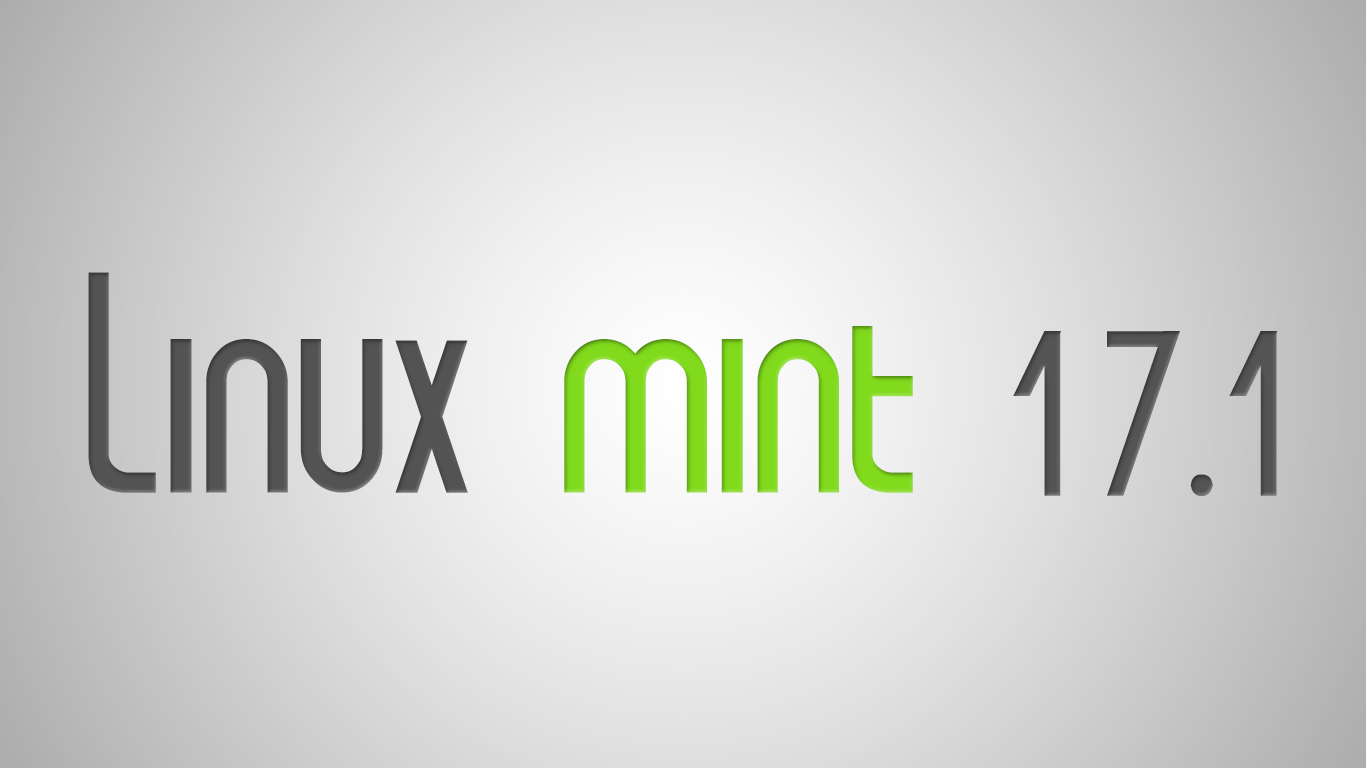
<style>
.page{position:relative;width:1366px;height:768px}
.page>*{position:absolute;margin:0}
.t1{font:333.3px "formintElegance";color:#535353}
.t2{font:333.3px "formintElegance";color:#81db1c}
.t3{font:250px "formintElegance";color:#545454}
</style>
<div class="page">
<p class="t1" style="left:88px;top:272px;width:1190px;height:224px">Linux <span class="t2">mint </span><span class="t3">17.1</span></p>
</div>
